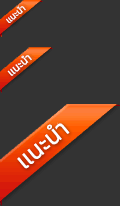
<style>
.page{position:relative;width:120px;height:206px;background:#333333}
.page>*{position:absolute;margin:0}
.t1{font:9px "NotoSansThai-Regular";color:#ffffff}
.t2{font:11px "NotoSansThai-Regular";color:#ffffff}
.t3{font:24px "NotoSansThai-Regular";color:#ffffff}
</style>
<div class="page">
<p class="t1" style="left:6px;top:6px;width:20px;height:17px;rotate:-40deg">แนะนำ</p>
<p class="t2" style="left:7px;top:55px;width:25px;height:21px;rotate:-40deg">แนะนำ</p>
<p class="t3" style="left:17px;top:123px;width:53px;height:46px;rotate:-40deg">แนะนำ</p>
</div>
